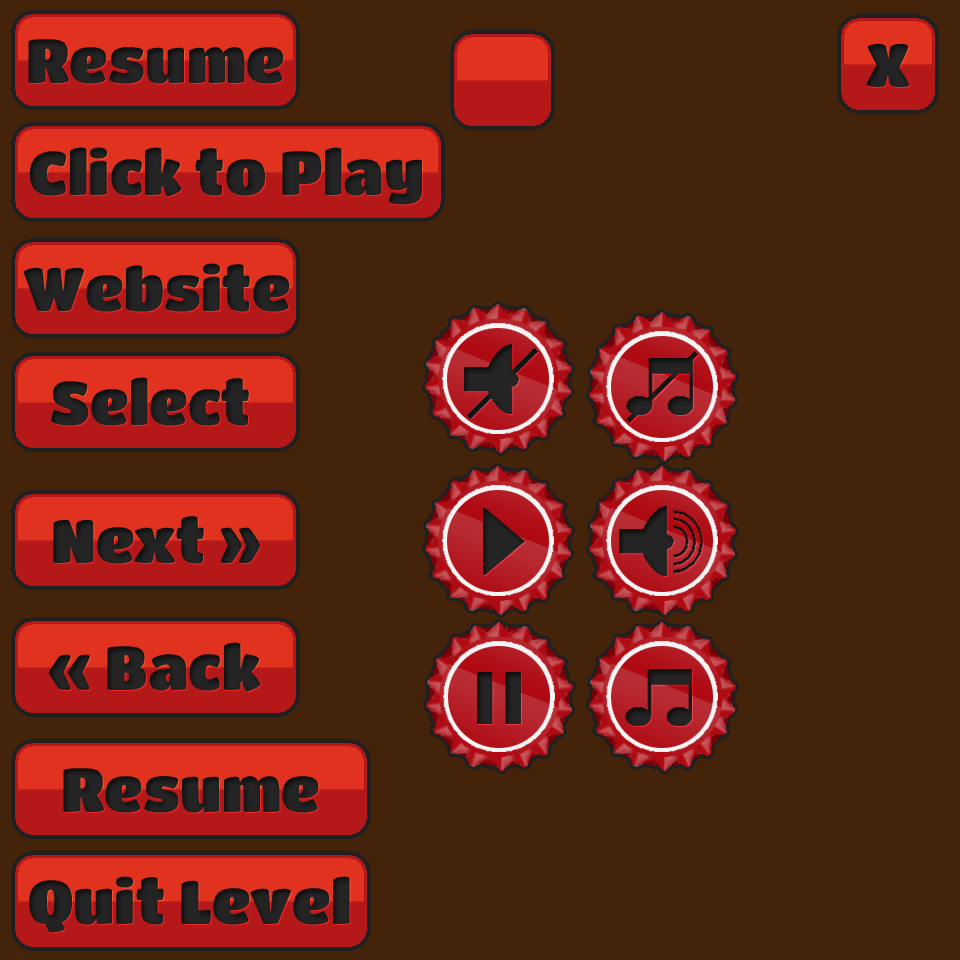
<style>
.page{position:relative;width:960px;height:960px;background:#43240a}
.page>*{position:absolute;margin:0}
.t1{font:60.7px "TitanOne";color:#222222}
</style>
<div class="page">
<p class="t1" style="left:28px;top:39px;width:256px;height:45px">Resume</p>
<p class="t1" style="left:29px;top:147px;width:393px;height:58px">Click to Play</p>
<p class="t1" style="left:23px;top:263px;width:267px;height:49px">Website</p>
<p class="t1" style="left:53px;top:516px;width:208px;height:48px">Next »</p>
<p class="t1" style="left:49px;top:642px;width:212px;height:50px">« Back</p>
<p class="t1" style="left:63px;top:768px;width:256px;height:45px">Resume</p>
<p class="t1" style="left:29px;top:876px;width:321px;height:57px">Quit Level</p>
</div>
